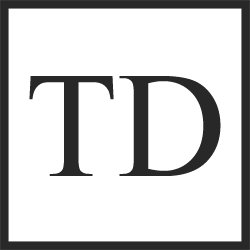
<style>
.page{position:relative;width:250px;height:250px;background:#ffffff}
.page>*{position:absolute;margin:0}
.t1{font:151.2px "TimesNewRomanPSMT";color:#282828}
</style>
<div class="page">
<p class="t1" style="left:29px;top:76px;width:192px;height:100px">TD</p>
</div>
